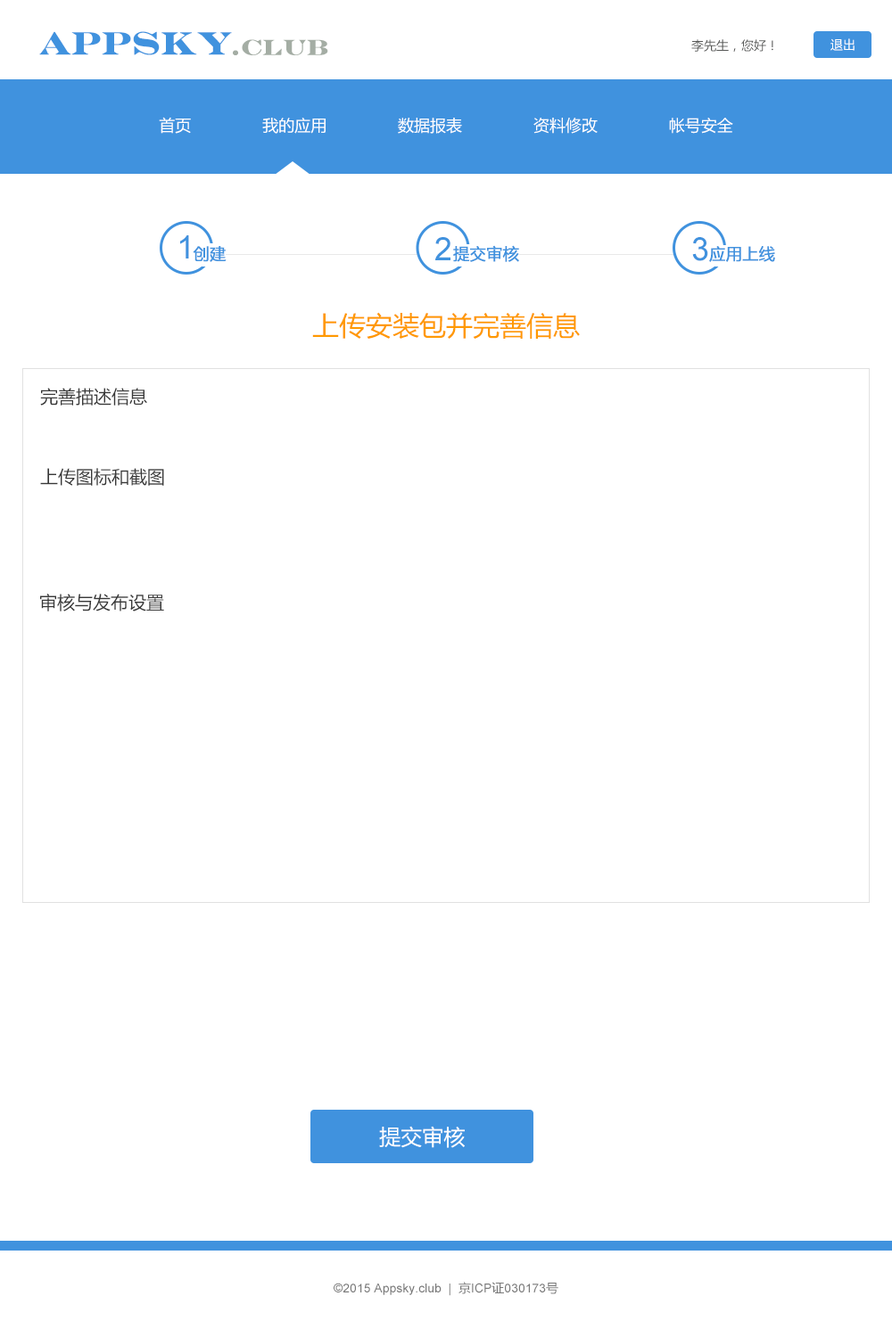
<style>
.page{position:relative;width:892px;height:1337px;background:#ffffff}
.page>*{position:absolute;margin:0}
.t1{font:32.1px "EngraversMT-Bold";color:#4092de;font-weight:bold}
.t2{font:21.7px "EngraversMT-Bold";color:#a4ada4;font-weight:bold}
.t3{font:12.5px "MicrosoftYaHei";color:#585958}
.t4{font:12.5px "MicrosoftYaHei";color:#ffffff}
.t5{font:16px "MicrosoftYaHei";color:#ffffff}
.t6{font:32.1px "ArialMT";color:#4092de}
.t7{font:16px "MicrosoftYaHei";color:#4092de;font-weight:bold}
.t8{font:26.7px "MicrosoftYaHei";color:#ff9900}
.t9{font:17.8px "MicrosoftYaHei";color:#383838}
.t10{font:21.4px "MicrosoftYaHei";color:#ffffff}
.t11{font:12.5px "ArialMT";color:#797979}
.t12{font:12.5px "MicrosoftYaHei";color:#797979}
</style>
<div class="page">
<p class="t1" style="left:39px;top:31px;width:193px;height:24px">APPSky</p>
<p class="t2" style="left:233px;top:39px;width:95px;height:16px">.CLUB</p>
<p class="t3" style="left:691px;top:39px;width:82px;height:13px">李先生，您好！</p>
<p class="t4" style="left:830px;top:38px;width:24px;height:13px">退出</p>
<p class="t5" style="left:159px;top:117px;width:574px;height:17px">首页               我的应用               数据报表               资料修改               帐号安全</p>
<p class="t6" style="left:180px;top:235px;width:9px;height:24px">1</p>
<p class="t6" style="left:435px;top:237px;width:15px;height:23px">2</p>
<p class="t7" style="left:453px;top:245px;width:66px;height:17px">提交审核</p>
<p class="t6" style="left:692px;top:237px;width:16px;height:24px">3</p>
<p class="t7" style="left:193px;top:246px;width:33px;height:16px">创建</p>
<p class="t7" style="left:709px;top:246px;width:66px;height:16px">应用上线</p>
<p class="t8" style="left:312px;top:312px;width:268px;height:27px">上传安装包并完善信息</p>
<p class="t9" style="left:40px;top:388px;width:107px;height:18px">完善描述信息</p>
<p class="t9" style="left:40px;top:468px;width:124px;height:18px">上传图标和截图</p>
<p class="t9" style="left:40px;top:594px;width:124px;height:18px">审核与发布设置</p>
<p class="t10" style="left:379px;top:1126px;width:86px;height:22px">提交审核</p>
<p class="t11" style="left:333px;top:1282px;width:225px;height:14px">©2015 Appsky.club  |  <span class="t12">京</span>ICP<span class="t12">证</span>030173<span class="t12">号</span></p>
</div>
